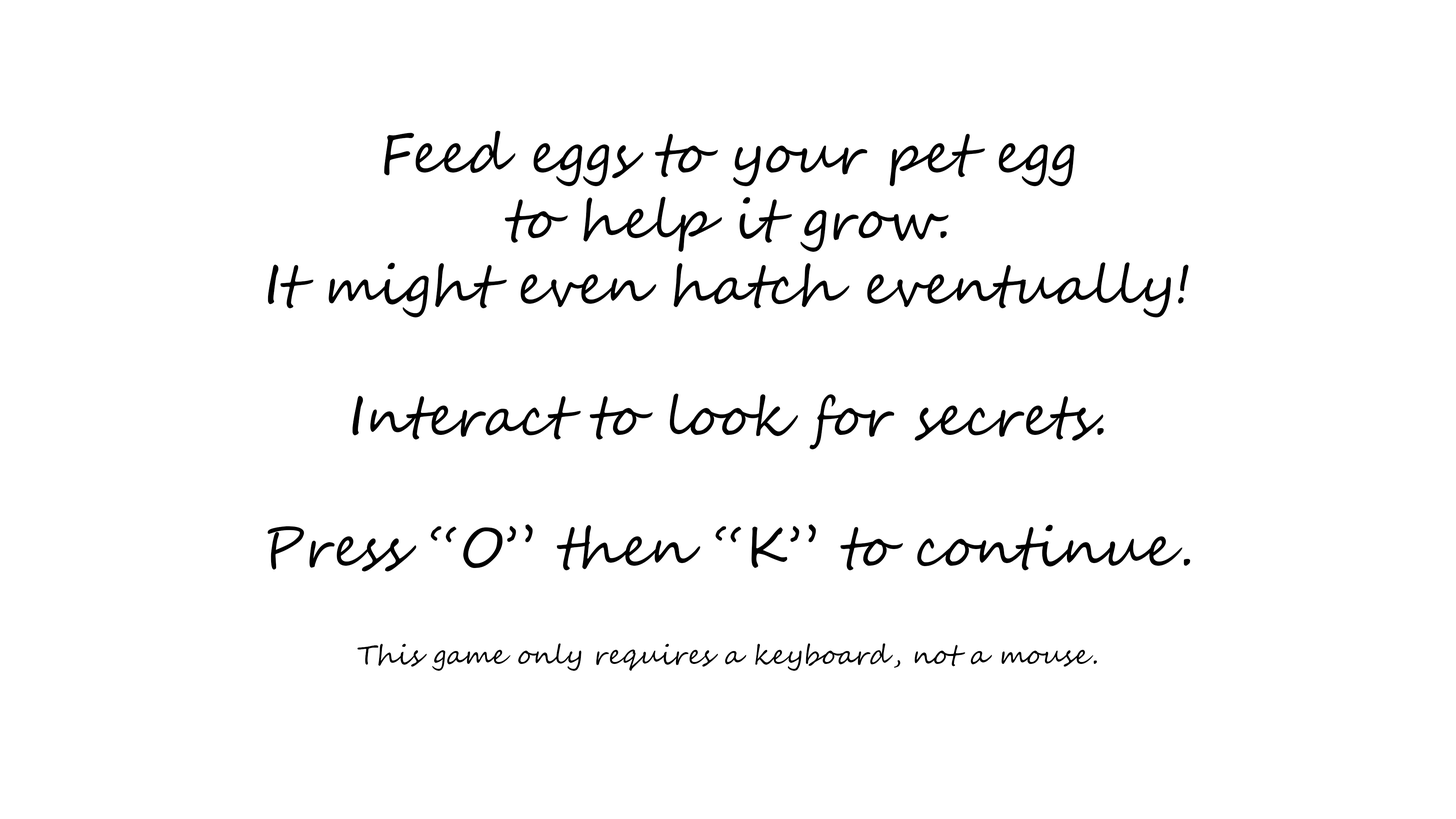
<style>
.page{position:relative;width:1456px;height:819px;background:#ffffff}
.page>*{position:absolute;margin:0}
.t1{font:54.6px "SegoeScript";color:#000000}
.t2{font:27.3px "SegoeScript";color:#000000}
</style>
<div class="page">
<p class="t1" style="left:267px;top:131px;width:923px;height:540px;text-align:center">Feed eggs to your pet egg<br>to help it grow.<br>It might even hatch eventually!<br><br>Interact to look for secrets.<br><br>Press “O” then “K” to continue.<br><span class="t2"><br><br>This game only requires a keyboard, not a mouse.</span></p>
</div>
